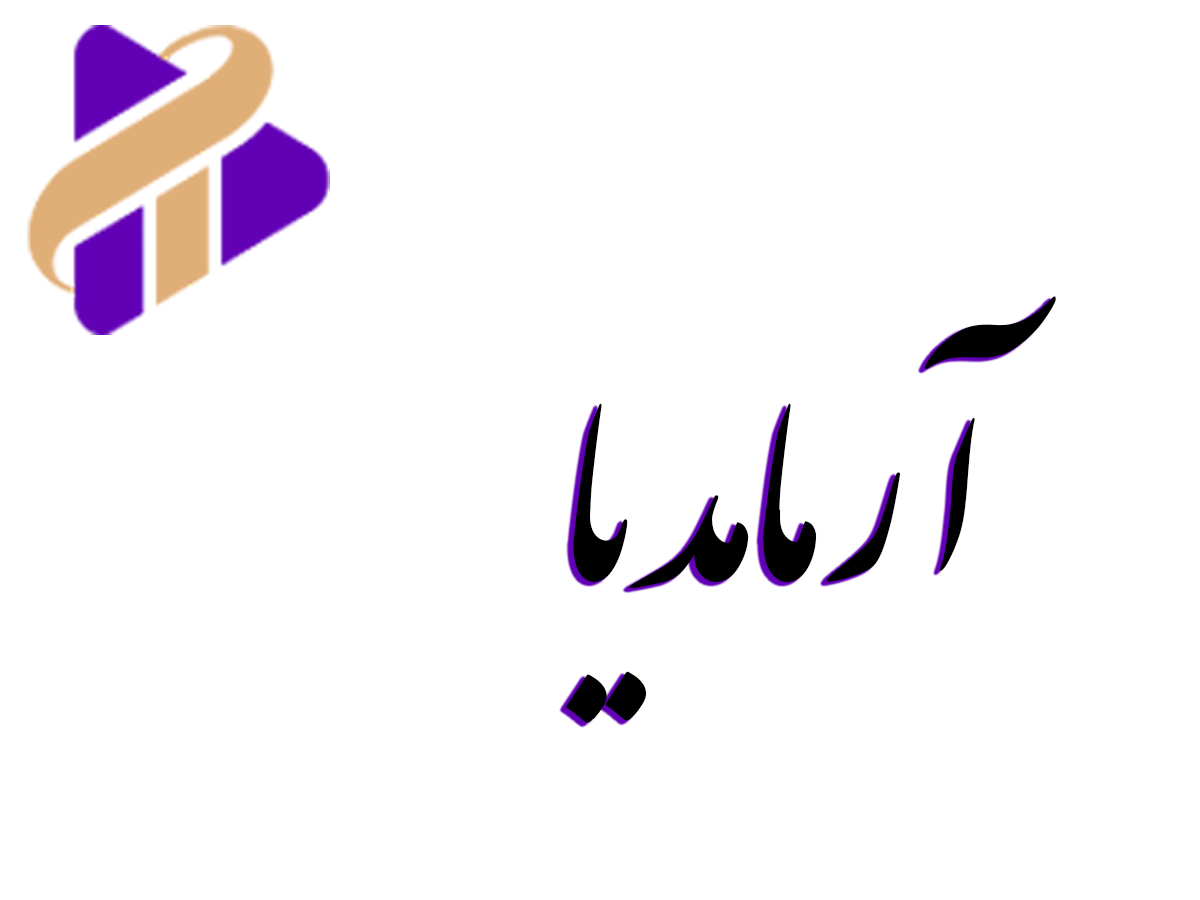
<style>
.page{position:relative;width:1200px;height:900px;background:#ffffff}
.page>*{position:absolute;margin:0}
.t1{font:263px "IranNastaliq";color:#000000}
</style>
<div class="page">
<p class="t1" style="left:566px;top:296px;width:490px;height:427px">آرمامدیا</p>
</div>
